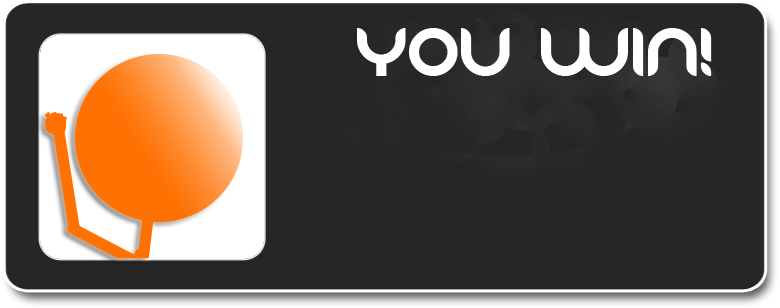
<style>
.page{position:relative;width:780px;height:308px;background:#262626}
.page>*{position:absolute;margin:0}
.t1{font:60px "Danube";color:#ffffff}
</style>
<div class="page">
<p class="t1" style="left:357px;top:28px;width:355px;height:48px">YOU WIN!</p>
</div>
